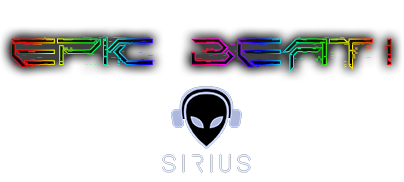
<style>
.page{position:relative;width:404px;height:182px;background:#ffffff}
.page>*{position:absolute;margin:0}
.t1{font:35px "Corruptor-LDR"}
</style>
<div class="page">
<p class="t1" style="left:8px;top:36px;width:384px;height:36px">EPIC BEAT !</p>
</div>
